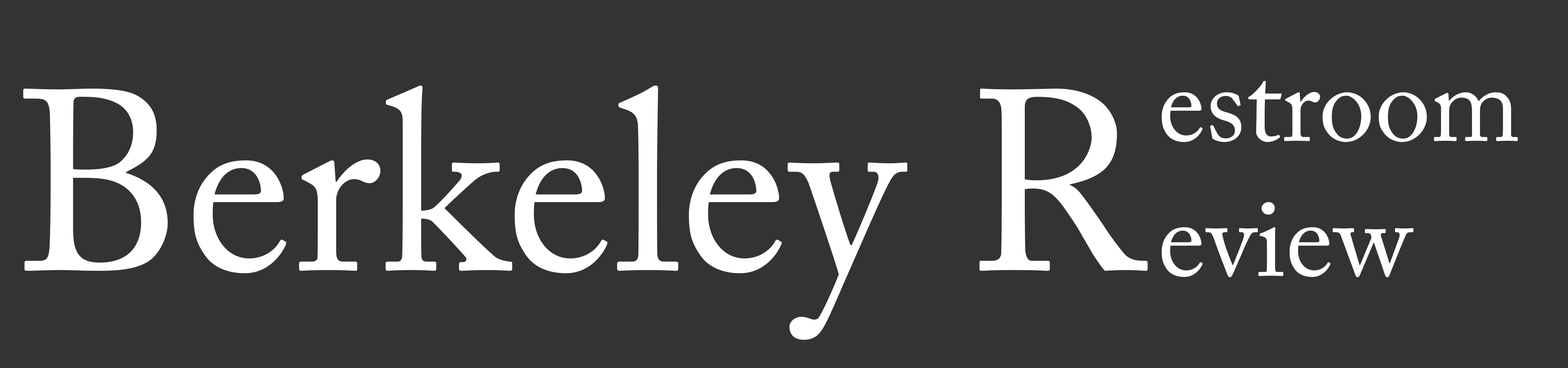
<style>
.page{position:relative;width:1568px;height:368px;background:#333333}
.page>*{position:absolute;margin:0}
.t1{font:255.6px "ACaslonPro-Regular";color:#ffffff}
.t2{font:112.5px "ACaslonPro-Regular";color:#ffffff}
</style>
<div class="page">
<p class="t1" style="left:23px;top:86px;width:1125px;height:254px">Berkeley R</p>
<p class="t2" style="left:1162px;top:81px;width:356px;height:196px">estroom<br>eview</p>
</div>
